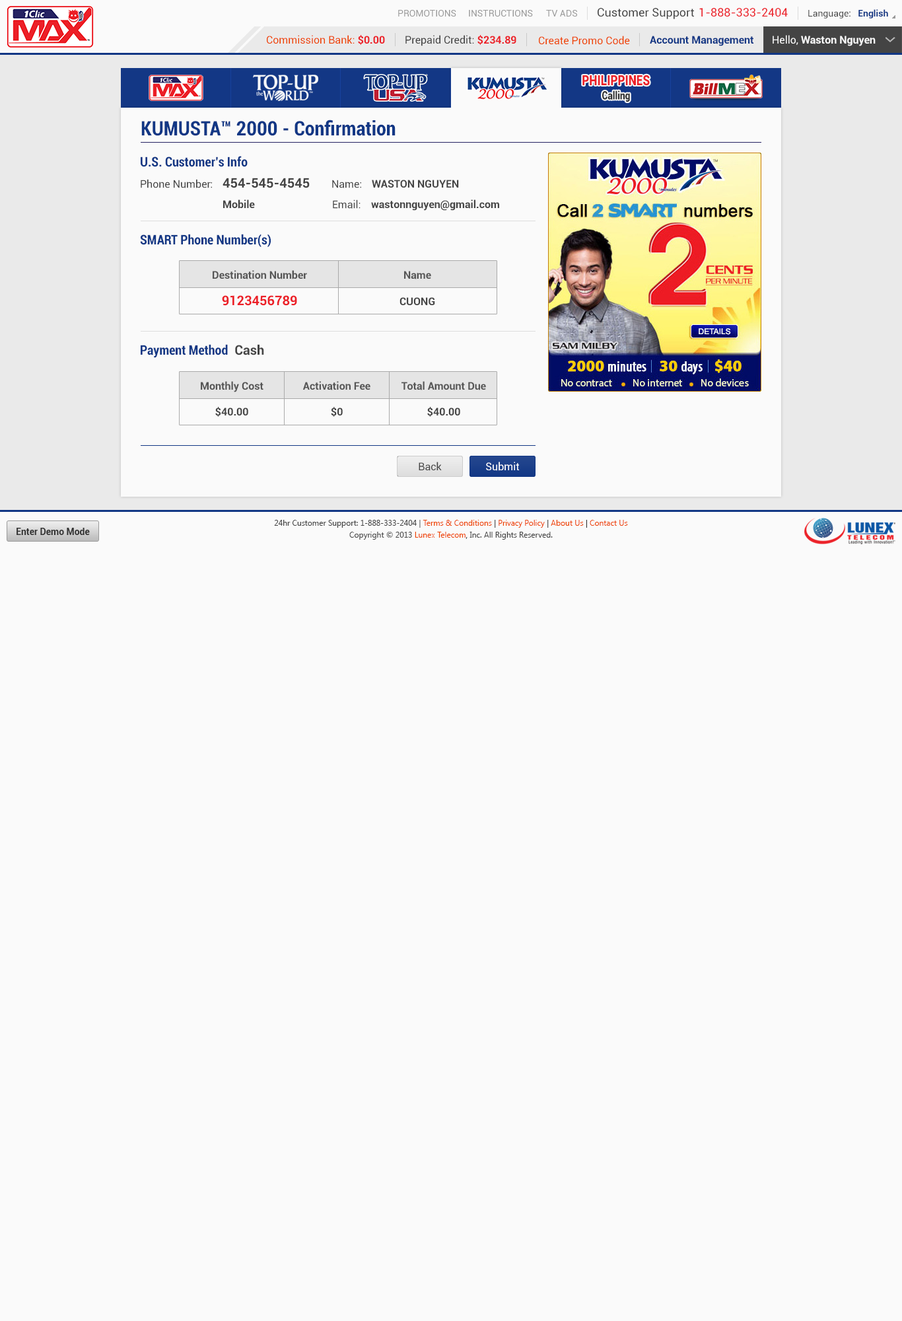
<style>
.page{position:relative;width:902px;height:1321px;background:#fafafa}
.page>*{position:absolute;margin:0}
.t1{font:9.2px "Roboto-Regular";color:#999999}
.t2{font:11.6px "Roboto-Regular";color:#444444}
.t3{font:11.6px "Roboto-Regular";color:#ec2029}
.t4{font:9.2px "Roboto-Regular";color:#444444}
.t5{font:9.2px "Roboto-Bold";color:#123785}
.t6{font:10.6px "Roboto-Regular";color:#ee4400}
.t7{font:10.6px "Roboto-Bold";color:#ec2028}
.t8{font:10.6px "Roboto-Regular";color:#444444}
.t9{font:10.6px "Roboto-Bold";color:#123785}
.t10{font:10.6px "Roboto-Bold";color:#fafafa}
.t11{font:10.6px "Roboto-Regular";color:#fafafa}
.t12{font:14.1px "Roboto-Black";color:#ec2028;scale:0.81 1}
.t13{font:11.3px "Roboto-Black";color:#333333;scale:0.81 1}
.t14{font:19.8px "Roboto-BoldCondensed";color:#123785}
.t15{font:13.2px "Roboto-BoldCondensed";color:#123785}
.t16{font:13.2px "Roboto-Bold";color:#444444}
.t17{font:10.6px "Roboto-Bold";color:#444444}
.t18{font:10.6px "Roboto-Bold";color:#555555}
.t19{font:13.2px "Roboto-Bold";color:#ec2028}
.t20{font:10.6px "Roboto-Regular";color:#ffffff}
.t21{font:7.9px/11.9px "SegoeUI";color:#444444}
.t22{font:7.9px/11.9px "SegoeUI";color:#ee4400}
.t23{font:7.9px/11.9px "SegoeUI";color:#333333}
.t24{font:9.2px "Roboto-Bold";color:#333333}
</style>
<div class="page">
<p class="t1" style="left:398px;top:10px;width:59px;height:7px">PROMOTIONS</p>
<p class="t1" style="left:469px;top:10px;width:64px;height:7px">INSTRUCTIONS</p>
<p class="t1" style="left:546px;top:10px;width:31px;height:7px">TV ADS</p>
<p class="t2" style="left:598px;top:8px;width:96px;height:11px">Customer Support</p>
<p class="t3" style="left:700px;top:8px;width:88px;height:9px">1-888-333-2404</p>
<p class="t4" style="left:809px;top:9px;width:80px;height:9px">Language:   <span class="t5">English</span></p>
<p class="t6" style="left:267px;top:35px;width:118px;height:10px">Commission Bank: <span class="t7">$0.00</span></p>
<p class="t8" style="left:406px;top:35px;width:111px;height:11px">Prepaid Credit: <span class="t7">$234.89</span></p>
<p class="t6" style="left:539px;top:36px;width:91px;height:9px">Create Promo Code</p>
<p class="t9" style="left:650px;top:36px;width:104px;height:10px">Account Management</p>
<p class="t10" style="left:773px;top:35px;width:103px;height:11px"><span class="t11">Hello, </span>Waston Nguyen</p>
<p class="t12" style="left:583px;top:75px;width:67px;height:11px">PHILIPPINES</p>
<p class="t13" style="left:603px;top:91px;width:27px;height:11px">Calling</p>
<p class="t14" style="left:141px;top:120px;width:255px;height:16px">KUMUSTA™ 2000 - Confirmation</p>
<p class="t15" style="left:141px;top:156px;width:107px;height:11px">U.S. Customer’s Info</p>
<p class="t8" style="left:141px;top:179px;width:71px;height:9px">Phone Number:</p>
<p class="t16" style="left:223px;top:178px;width:87px;height:10px">454-545-4545</p>
<p class="t8" style="left:332px;top:180px;width:29px;height:8px">Name:</p>
<p class="t17" style="left:372px;top:180px;width:87px;height:8px">WASTON NGUYEN</p>
<p class="t17" style="left:223px;top:200px;width:32px;height:9px">Mobile</p>
<p class="t8" style="left:333px;top:200px;width:28px;height:9px">Email:</p>
<p class="t17" style="left:371px;top:200px;width:128px;height:11px">wastonnguyen@gmail.com</p>
<p class="t15" style="left:140px;top:234px;width:131px;height:13px">SMART Phone Number(s)</p>
<p class="t18" style="left:213px;top:270px;width:94px;height:9px">Destination Number</p>
<p class="t18" style="left:404px;top:271px;width:27px;height:8px">Name</p>
<p class="t19" style="left:222px;top:295px;width:75px;height:11px">9123456789</p>
<p class="t17" style="left:400px;top:297px;width:35px;height:8px">CUONG</p>
<p class="t15" style="left:141px;top:344px;width:123px;height:14px">Payment Method<span class="t16">  Cash</span></p>
<p class="t18" style="left:201px;top:381px;width:63px;height:11px">Monthly Cost</p>
<p class="t18" style="left:303px;top:381px;width:68px;height:9px">Activation Fee</p>
<p class="t18" style="left:402px;top:381px;width:84px;height:9px">Total Amount Due</p>
<p class="t17" style="left:215px;top:407px;width:33px;height:10px">$40.00</p>
<p class="t17" style="left:331px;top:407px;width:12px;height:10px">$0</p>
<p class="t17" style="left:427px;top:407px;width:33px;height:10px">$40.00</p>
<p class="t8" style="left:419px;top:462px;width:23px;height:9px">Back</p>
<p class="t20" style="left:486px;top:462px;width:34px;height:9px">Submit</p>
<p class="t21" style="left:274px;top:520px;width:354px;height:20px;text-align:center">24hr Customer Support: 1-888-333-2404 | <span class="t22">Terms &amp; Conditions</span><span class="t23"> | </span><span class="t22">Privacy Policy</span><span class="t23"> | </span><span class="t22">About Us</span><span class="t23"> | </span><span class="t22">Contact Us<br></span>Copyright © 2013 <span class="t22">Lunex Telecom</span><span class="t23">,</span> Inc. All Rights Reserved.</p>
<p class="t24" style="left:17px;top:528px;width:73px;height:7px">Enter Demo Mode</p>
</div>
